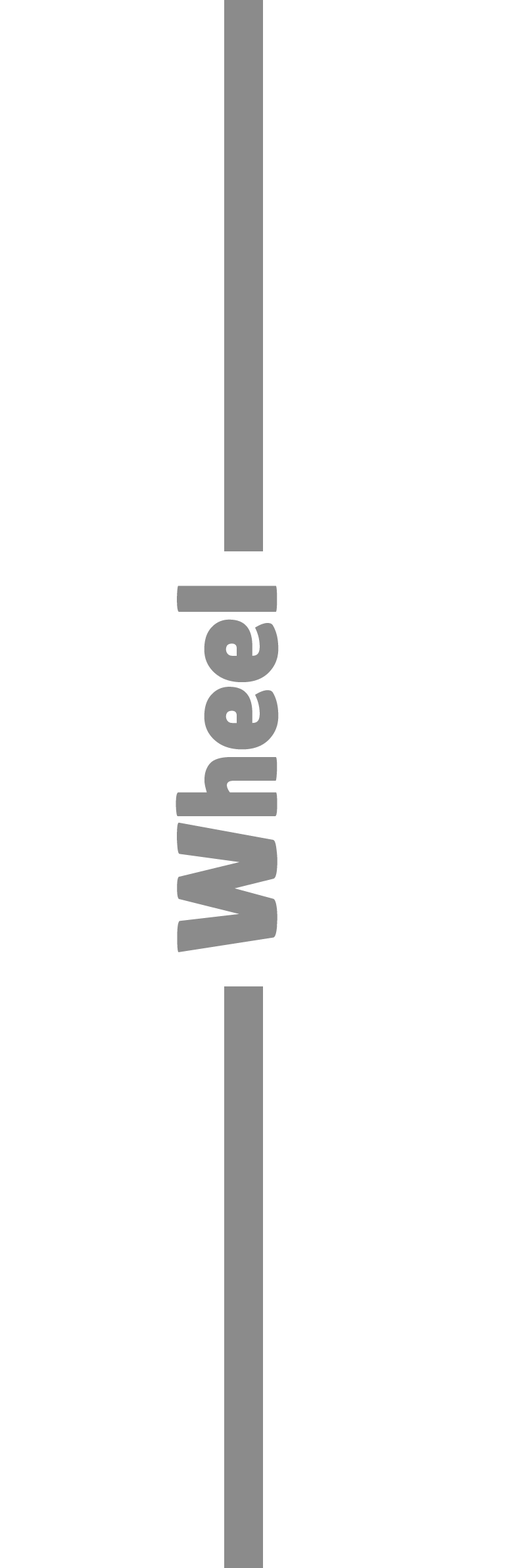
<style>
.page{position:relative;width:526px;height:1568px;background:#ffffff}
.page>*{position:absolute;margin:0}
.t1{font:141.9px "LilitaOne";color:#8b8b8b}
</style>
<div class="page">
<p class="t1" style="left:175px;top:586px;width:104px;height:366px;rotate:-90deg">Wheel</p>
</div>
